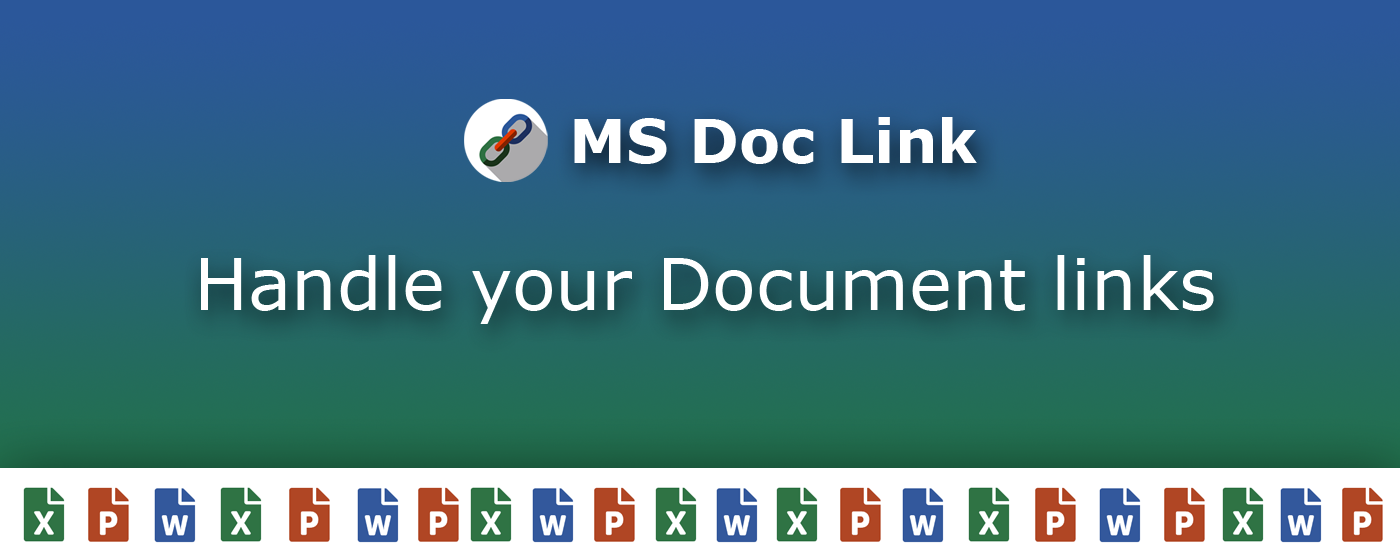
<style>
.page{position:relative;width:1400px;height:560px}
.page>*{position:absolute;margin:0}
.t1{font:60px "Verdana-Bold";color:#ffffff}
.t2{font:72px "Verdana";color:#ffffff}
</style>
<div class="page">
<p class="t1" style="left:574px;top:117px;width:403px;height:47px">MS Doc Link</p>
<p class="t2" style="left:201px;top:255px;width:1013px;height:69px">Handle your Document links</p>
</div>
